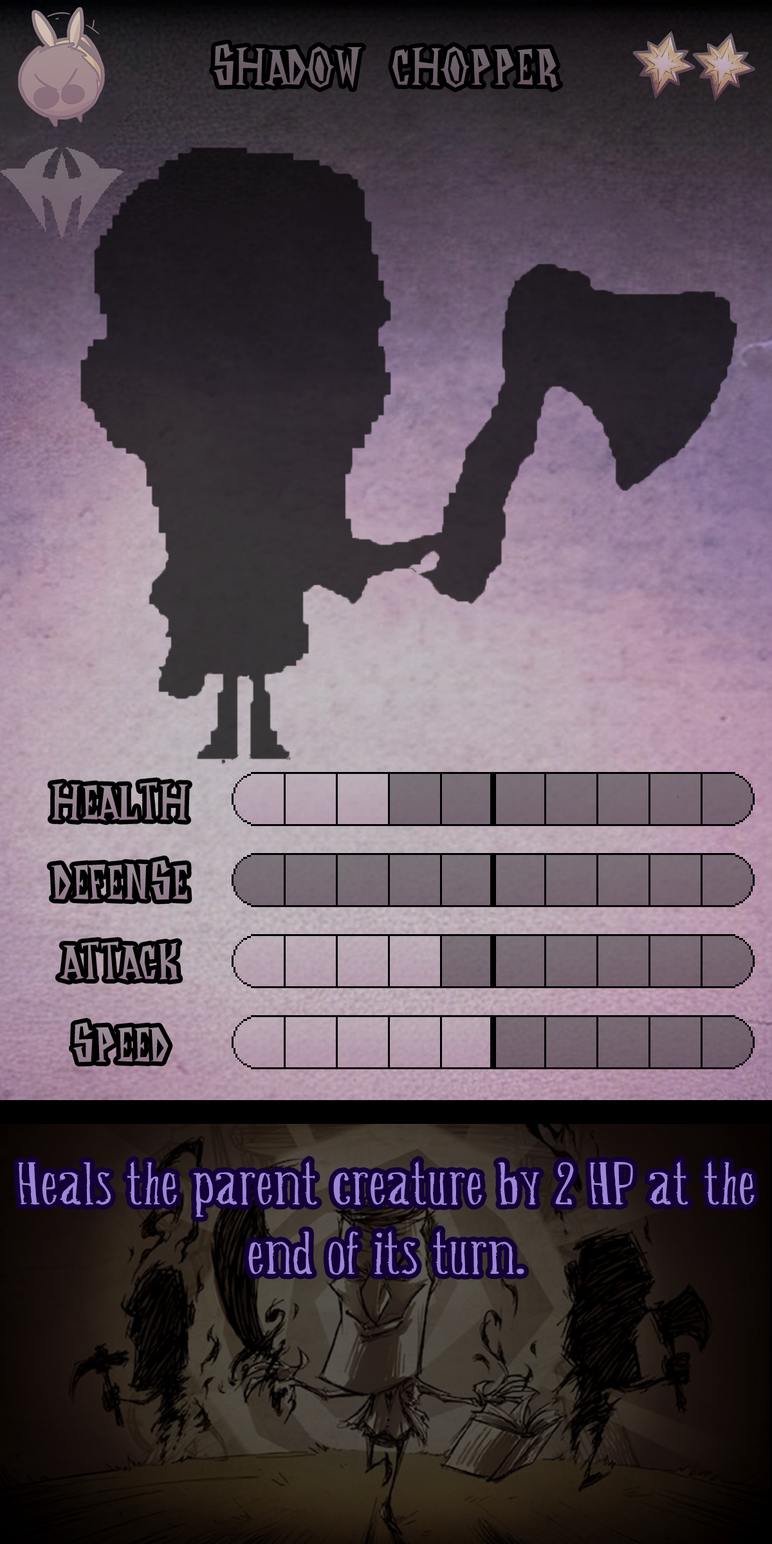
<style>
.page{position:relative;width:772px;height:1544px}
.page>*{position:absolute;margin:0}
.t1{font:96.5px "DontStarveNameFont";color:#6a5d67}
.t2{font:92.7px "DontStarveNameFont";color:#968391}
.t3{font:79.1px "Belisaplumillamanual";color:#9e85d7;scale:1.67 1}
</style>
<div class="page">
<p class="t1" style="left:213px;top:44px;width:346px;height:44px">Shadow Chopper</p>
<p class="t2" style="left:51px;top:782px;width:138px;height:39px">Health</p>
<p class="t2" style="left:51px;top:860px;width:137px;height:40px">Defense</p>
<p class="t2" style="left:59px;top:941px;width:120px;height:40px">Attack</p>
<p class="t2" style="left:73px;top:1022px;width:96px;height:40px">Speed</p>
<p class="t3" style="left:18px;top:1161px;width:737px;height:114px">Heals the parent creature by 2 HP at the end of its turn.</p>
</div>
